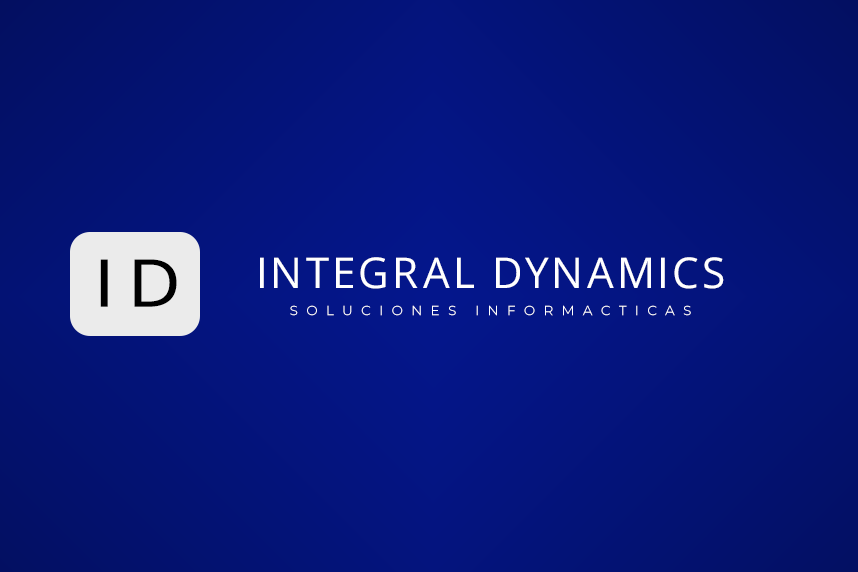
<style>
.page{position:relative;width:858px;height:572px}
.page>*{position:absolute;margin:0}
.t1{font:42.3px "OpenSans-Regular";letter-spacing:0.075em;color:#ffffff}
.t2{font:66.2px "OpenSansRoman_457.000wght_0ital";letter-spacing:0.2em;color:#000000;scale:1.11 1}
.t3{font:13.7px "Montserrat-Regular";letter-spacing:0.6em;color:#ffffff}
</style>
<div class="page">
<p class="t1" style="left:260px;top:257px;width:464px;height:32px">INTEGRAL DYNAMICS</p>
<p class="t2" style="left:100px;top:259px;width:77px;height:48px">ID</p>
<p class="t3" style="left:290px;top:305px;width:401px;height:11px">SOLUCIONES INFORMACTICAS</p>
</div>
